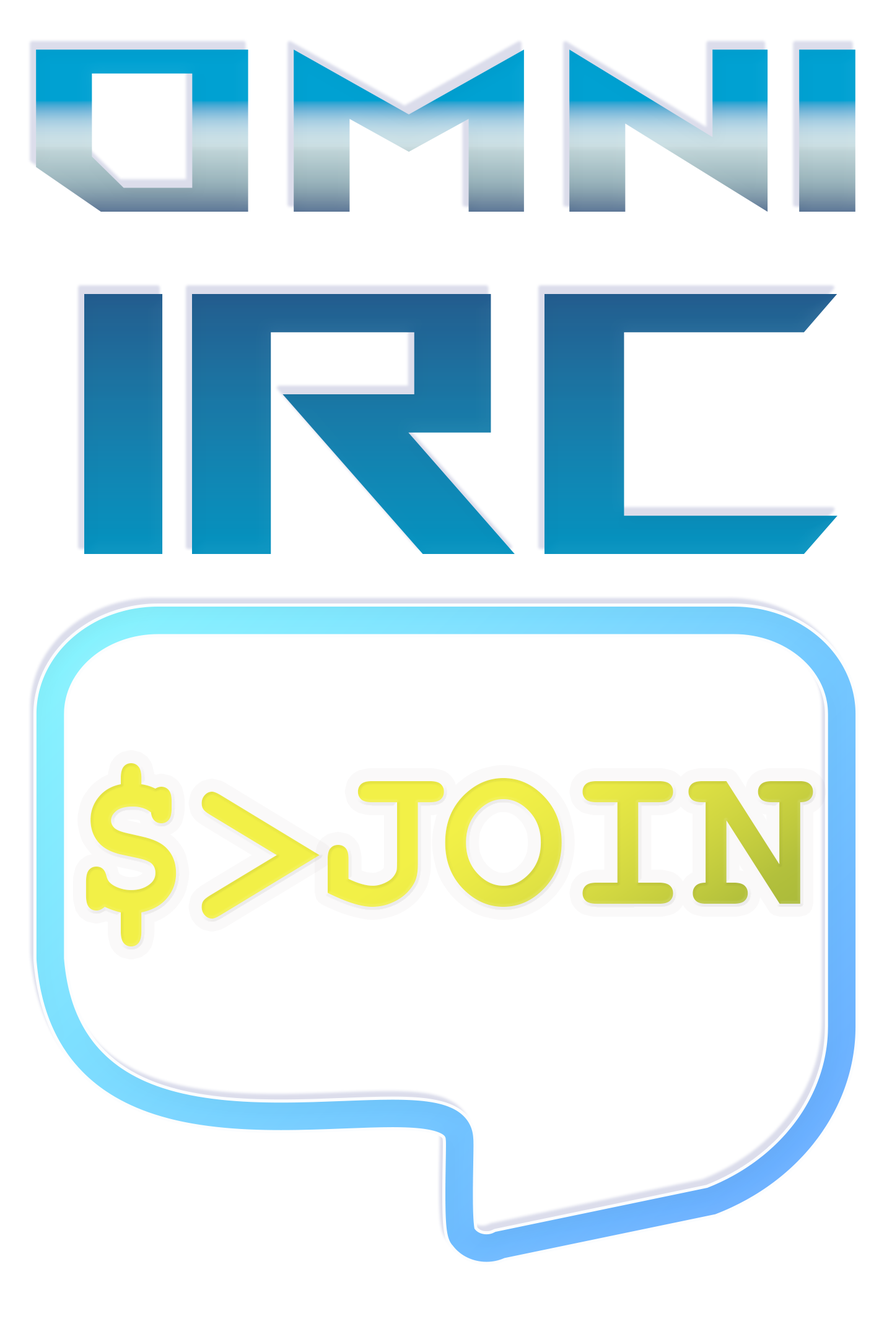
<style>
.page{position:relative;width:892px;height:1337px;background:#ffffff}
.page>*{position:absolute;margin:0}
.t1{font:231.6px "AniMeVisionMB_EN";scale:1.15 1}
.t2{font:371.5px "AniMeVisionMB_EN"}
.t3{font:223.8px "CourierNewPS-BoldMT";color:#f2f047;scale:0.92 1}
.t4{font:207.2px "CourierNewPS-BoldMT";color:#e1e344}
</style>
<div class="page">
<p class="t1" style="left:36px;top:50px;width:819px;height:162px">OMNI</p>
<p class="t2" style="left:84px;top:294px;width:753px;height:260px">IRC</p>
<p class="t3" style="left:85px;top:763px;width:234px;height:184px">$&gt;</p>
<p class="t4" style="left:328px;top:778px;width:485px;height:129px">JOIN</p>
</div>
